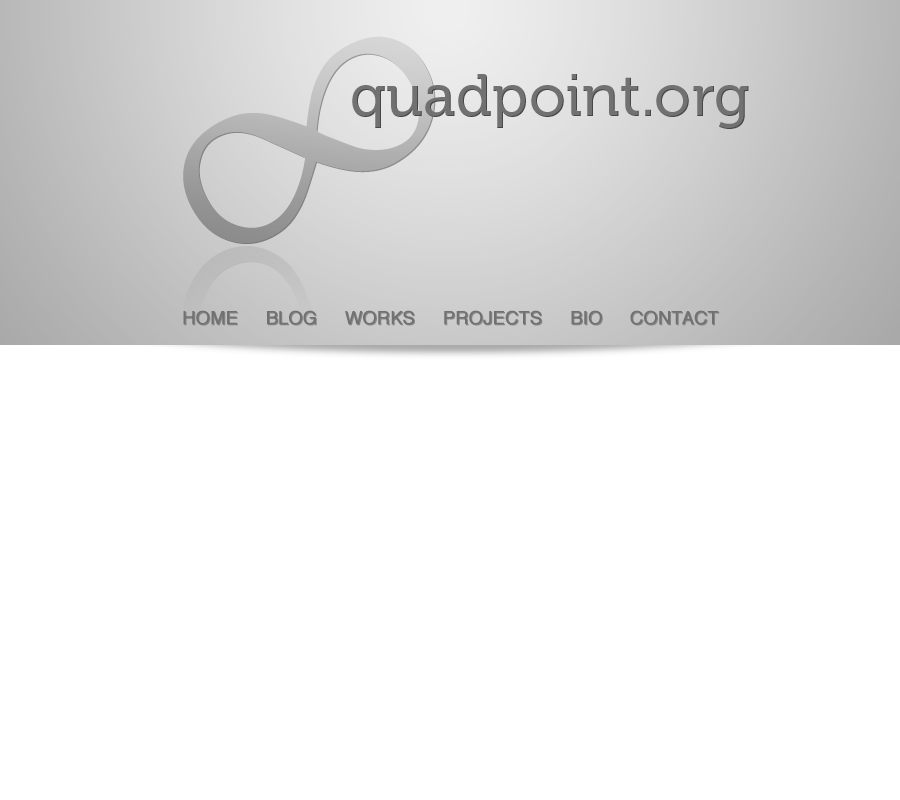
<style>
.page{position:relative;width:900px;height:800px;background:#ffffff}
.page>*{position:absolute;margin:0}
.t1{font:400px "Palatino-Roman"}
.t2{font:60px "Museo-500";color:#717171}
.t3{font:18px "Helvetica";color:#717171;font-variant:small-caps;font-weight:bold}
</style>
<div class="page">
<p class="t1" style="left:183px;top:36px;width:253px;height:208px;rotate:-31deg">∞</p>
<p class="t2" style="left:352px;top:74px;width:397px;height:55px">quadpoint.org</p>
<p class="t3" style="left:183px;top:310px;width:536px;height:15px">HOME     BLOG     WORKS     PROJECTS     BIO     CONTACT</p>
</div>
